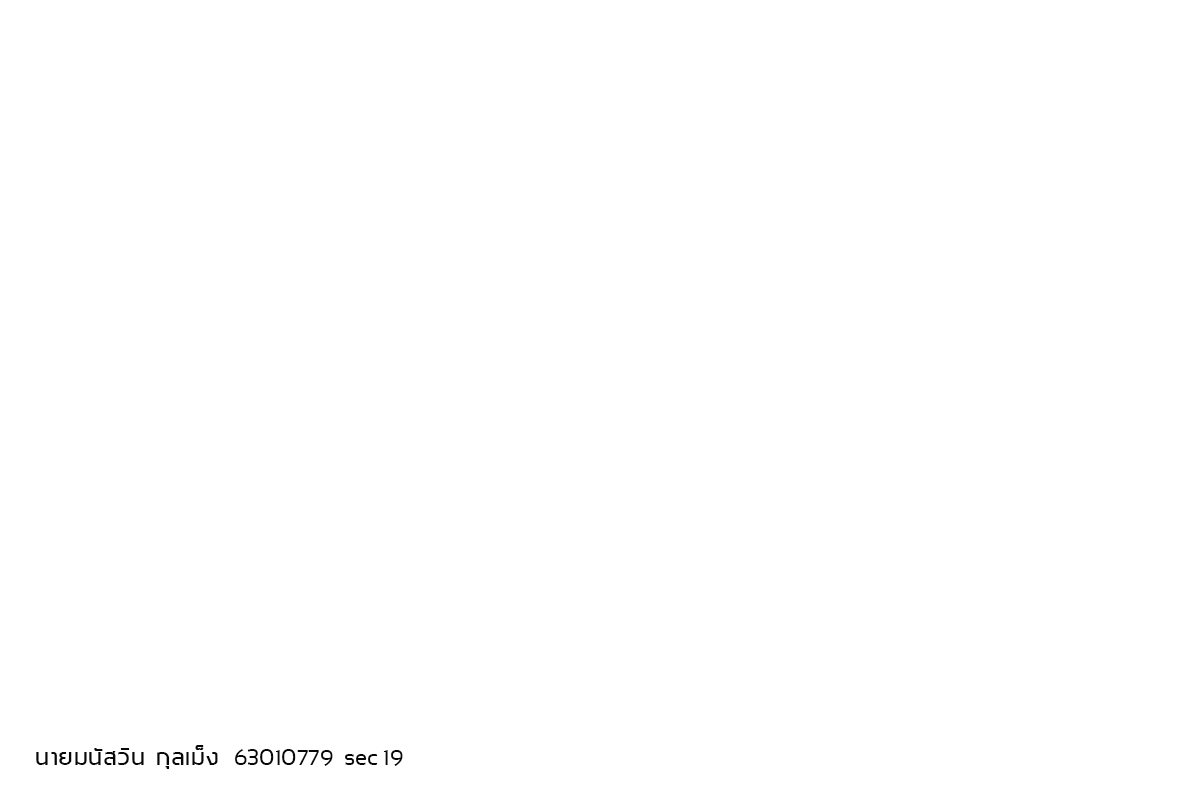
<style>
.page{position:relative;width:1200px;height:800px;background:#ffffff}
.page>*{position:absolute;margin:0}
.t1{font:34.2px "SB-Modern";color:#080808}
</style>
<div class="page">
<p class="t1" style="left:36px;top:745px;width:367px;height:24px">นายมนัสวิน  กุลเม็ง   63010779  sec 19</p>
</div>
